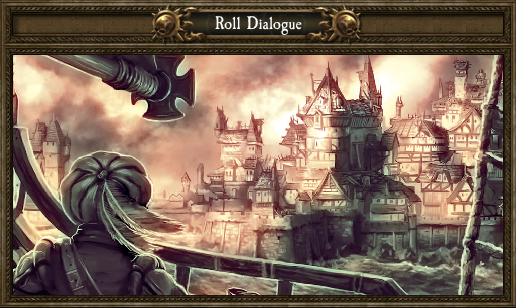
<style>
.page{position:relative;width:516px;height:308px}
.page>*{position:absolute;margin:0}
.t1{font:19px "CaslonAntique";color:#ffffff}
</style>
<div class="page">
<p class="t1" style="left:215px;top:16px;width:87px;height:19px">Roll Dialogue</p>
</div>
